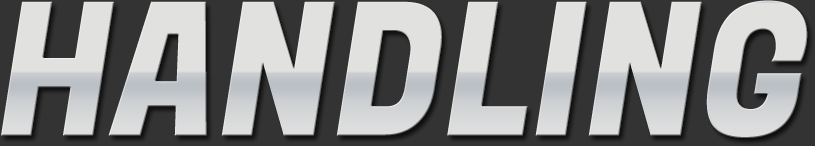
<style>
.page{position:relative;width:815px;height:146px;background:#333333}
.page>*{position:absolute;margin:0}
.t1{font:185.2px "FugazOne-Regular";color:#dfdfdf;scale:0.89 1}
</style>
<div class="page">
<p class="t1" style="left:1px;top:0px;width:807px;height:138px">HANDLING</p>
</div>
